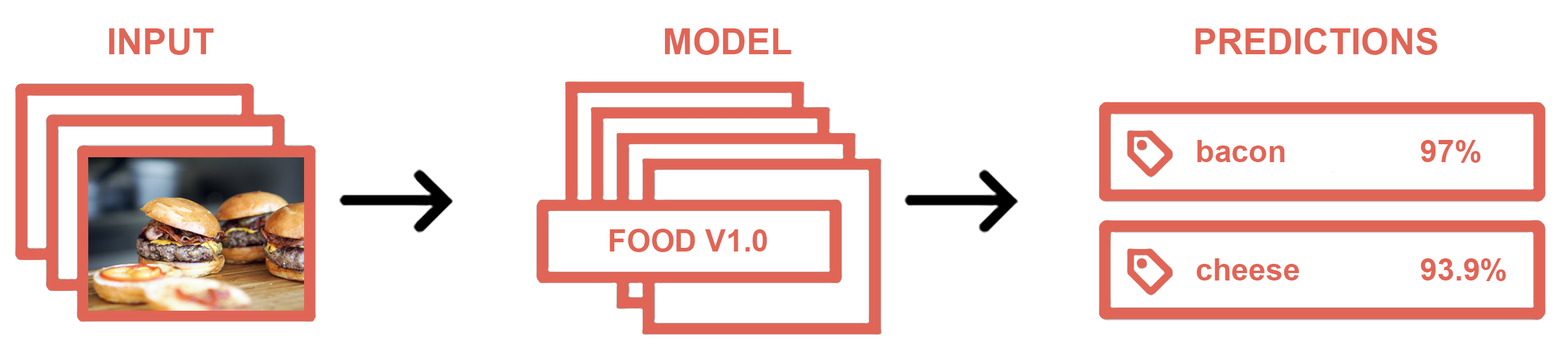
<style>
.page{position:relative;width:1568px;height:352px;background:#ffffff}
.page>*{position:absolute;margin:0}
.t1{font:36px "Arial-BoldMT";color:#e16556}
.t2{font:30.8px "Arial-BoldMT";color:#e16556}
</style>
<div class="page">
<p class="t1" style="left:109px;top:28px;width:105px;height:27px">INPUT</p>
<p class="t1" style="left:665px;top:28px;width:126px;height:27px">MODEL</p>
<p class="t1" style="left:1195px;top:28px;width:242px;height:27px">PREDICTIONS</p>
<p class="t2" style="left:1197px;top:140px;width:88px;height:22px">bacon</p>
<p class="t2" style="left:1421px;top:140px;width:59px;height:23px">97%</p>
<p class="t2" style="left:609px;top:229px;width:158px;height:23px">FOOD V1.0</p>
<p class="t2" style="left:1197px;top:258px;width:102px;height:23px">cheese</p>
<p class="t2" style="left:1421px;top:258px;width:85px;height:23px">93.9%</p>
</div>
